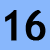
<style>
.page{position:relative;width:50px;height:50px;background:#88b7fc}
.page>*{position:absolute;margin:0}
.t1{font:41.7px "TrebuchetMS";color:#000000;font-weight:bold}
</style>
<div class="page">
<p class="t1" style="left:5px;top:10px;width:41px;height:31px">16</p>
</div>
